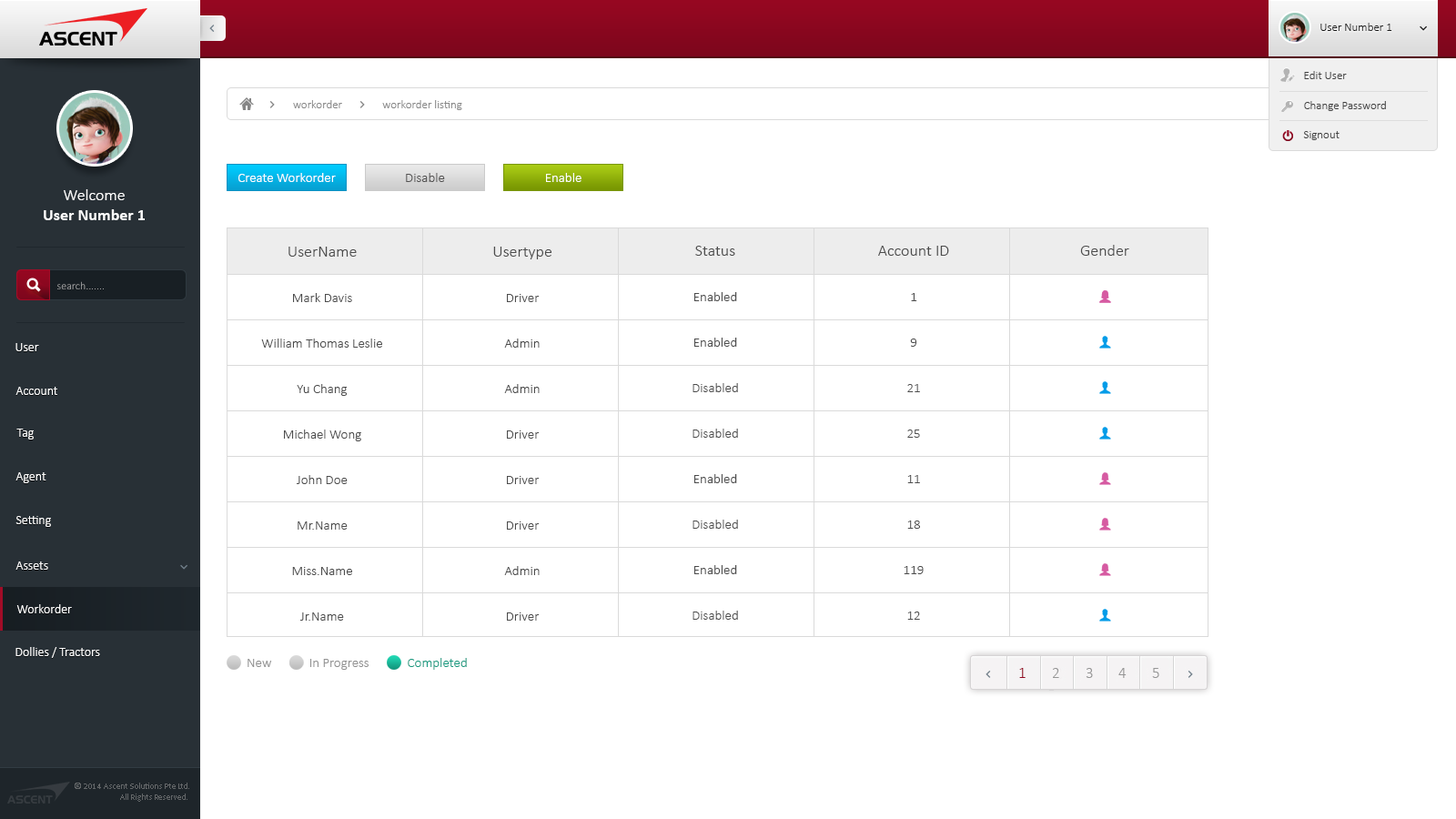
<style>
.page{position:relative;width:1456px;height:819px;background:#ffffff}
.page>*{position:absolute;margin:0}
.t1{font:11.8px "Calibri-Light";color:#1c1c1c}
.t2{font:11.8px "Calibri-Light";color:#414141}
.t3{font:11.8px "Calibri-Light";color:#868686}
.t4{font:13.6px "Calibri-Light";color:#ffffff}
.t5{font:13.6px "Calibri-Light";color:#525151}
.t6{font:16.4px "Calibri-Bold";color:#ffffff}
.t7{font:16.4px "Calibri-Light";color:#ffffff}
.t8{font:16.4px "Calibri-Light";color:#4c4c4c}
.t9{font:10.9px "Calibri-Light";color:#a8a9aa}
.t10{font:13.6px "Calibri-Light";color:#4c4c4c}
.t11{font:12.7px "Calibri-Light";color:#ffffff}
.t12{font:13.6px "Calibri-Light";color:#919191}
.t13{font:13.6px "Calibri-Light";color:#149a80}
.t14{font:15.5px "Calibri-Light";color:#940721}
.t15{font:15.5px "Calibri-Light";color:#959595}
.t16{font:9.1px "Calibri-Light";color:#646769}
</style>
<div class="page">
<p class="t1" style="left:1320px;top:23px;width:72px;height:8px">User Number 1</p>
<p class="t2" style="left:1304px;top:71px;width:43px;height:8px">Edit User</p>
<p class="t3" style="left:293px;top:100px;width:49px;height:8px">workorder</p>
<p class="t3" style="left:382px;top:100px;width:80px;height:10px">workorder listing</p>
<p class="t2" style="left:1304px;top:101px;width:82px;height:10px">Change Password</p>
<p class="t2" style="left:1303px;top:131px;width:37px;height:9px">Signout</p>
<p class="t4" style="left:238px;top:173px;width:98px;height:9px">Create Workorder</p>
<p class="t5" style="left:406px;top:173px;width:39px;height:9px">Disable</p>
<p class="t4" style="left:546px;top:173px;width:35px;height:9px">Enable</p>
<p class="t6" style="left:44px;top:189px;width:101px;height:31px;text-align:center"><span class="t7">Welcome<br></span>User Number 1</p>
<p class="t8" style="left:695px;top:246px;width:40px;height:10px">Status</p>
<p class="t8" style="left:878px;top:246px;width:71px;height:10px">Account ID</p>
<p class="t8" style="left:1080px;top:245px;width:49px;height:11px">Gender</p>
<p class="t8" style="left:288px;top:247px;width:69px;height:10px">UserName</p>
<p class="t8" style="left:493px;top:247px;width:59px;height:12px">Usertype</p>
<p class="t9" style="left:57px;top:281px;width:47px;height:8px">search.......</p>
<p class="t10" style="left:293px;top:293px;width:59px;height:9px">Mark Davis</p>
<p class="t10" style="left:507px;top:294px;width:33px;height:8px">Driver</p>
<p class="t10" style="left:694px;top:292px;width:43px;height:9px">Enabled</p>
<p class="t10" style="left:911px;top:293px;width:6px;height:8px">1</p>
<p class="t10" style="left:261px;top:339px;width:121px;height:9px">William Thomas Leslie</p>
<p class="t10" style="left:504px;top:339px;width:36px;height:9px">Admin</p>
<p class="t10" style="left:694px;top:338px;width:43px;height:9px">Enabled</p>
<p class="t10" style="left:910px;top:339px;width:7px;height:8px">9</p>
<p class="t11" style="left:15px;top:343px;width:24px;height:8px">User</p>
<p class="t11" style="left:15px;top:387px;width:42px;height:8px">Account</p>
<p class="t10" style="left:297px;top:384px;width:51px;height:12px">Yu Chang</p>
<p class="t10" style="left:504px;top:384px;width:36px;height:9px">Admin</p>
<p class="t10" style="left:693px;top:383px;width:45px;height:9px">Disabled</p>
<p class="t10" style="left:907px;top:384px;width:13px;height:8px">21</p>
<p class="t11" style="left:16px;top:429px;width:18px;height:11px">Tag</p>
<p class="t10" style="left:284px;top:430px;width:77px;height:11px">Michael Wong</p>
<p class="t10" style="left:507px;top:430px;width:33px;height:9px">Driver</p>
<p class="t10" style="left:693px;top:429px;width:45px;height:9px">Disabled</p>
<p class="t10" style="left:907px;top:430px;width:13px;height:8px">25</p>
<p class="t11" style="left:15px;top:472px;width:31px;height:11px">Agent</p>
<p class="t10" style="left:297px;top:475px;width:51px;height:9px">John Doe</p>
<p class="t10" style="left:507px;top:476px;width:33px;height:8px">Driver</p>
<p class="t10" style="left:694px;top:474px;width:43px;height:9px">Enabled</p>
<p class="t10" style="left:907px;top:475px;width:13px;height:8px">11</p>
<p class="t11" style="left:15px;top:516px;width:36px;height:11px">Setting</p>
<p class="t10" style="left:298px;top:521px;width:50px;height:9px">Mr.Name</p>
<p class="t10" style="left:507px;top:521px;width:33px;height:9px">Driver</p>
<p class="t10" style="left:693px;top:520px;width:45px;height:9px">Disabled</p>
<p class="t10" style="left:907px;top:521px;width:13px;height:8px">18</p>
<p class="t11" style="left:15px;top:561px;width:33px;height:9px">Assets</p>
<p class="t10" style="left:292px;top:567px;width:60px;height:8px">Miss.Name</p>
<p class="t10" style="left:504px;top:566px;width:36px;height:9px">Admin</p>
<p class="t10" style="left:694px;top:565px;width:43px;height:9px">Enabled</p>
<p class="t10" style="left:904px;top:566px;width:20px;height:8px">119</p>
<p class="t11" style="left:16px;top:604px;width:56px;height:9px">Workorder</p>
<p class="t10" style="left:300px;top:612px;width:44px;height:9px">Jr.Name</p>
<p class="t10" style="left:507px;top:612px;width:33px;height:9px">Driver</p>
<p class="t10" style="left:693px;top:611px;width:45px;height:9px">Disabled</p>
<p class="t10" style="left:907px;top:612px;width:13px;height:8px">12</p>
<p class="t11" style="left:15px;top:647px;width:85px;height:11px">Dollies / Tractors</p>
<p class="t12" style="left:248px;top:659px;width:24px;height:8px">New</p>
<p class="t12" style="left:310px;top:659px;width:59px;height:11px">In Progress</p>
<p class="t13" style="left:408px;top:658px;width:59px;height:12px">Completed</p>
<p class="t14" style="left:1019px;top:668px;width:7px;height:10px">1</p>
<p class="t15" style="left:1053px;top:668px;width:6px;height:10px">2</p>
<p class="t15" style="left:1086px;top:668px;width:7px;height:10px">3</p>
<p class="t15" style="left:1118px;top:668px;width:9px;height:10px">4</p>
<p class="t15" style="left:1152px;top:668px;width:7px;height:10px">5</p>
<p class="t16" style="left:75px;top:783px;width:114px;height:19px;text-align:right">© 2014 Ascent Solutions Pte Ltd.<br>All Rights Reserved.</p>
</div>
